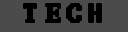
<style>
.page{position:relative;width:128px;height:32px;background:#4b4b4b}
.page>*{position:absolute;margin:0}
.t1{font:29.3px "Terminal";letter-spacing:0.2em;color:#000000}
</style>
<div class="page">
<p class="t1" style="left:24px;top:4px;width:77px;height:18px">TECH</p>
</div>
